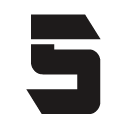
<style>
.page{position:relative;width:128px;height:128px;background:#ffffff}
.page>*{position:absolute;margin:0}
.t1{font:158px "ARDESTINE";color:#1e1b1b;scale:0.92 1}
</style>
<div class="page">
<p class="t1" style="left:26px;top:14px;width:75px;height:100px">5</p>
</div>
